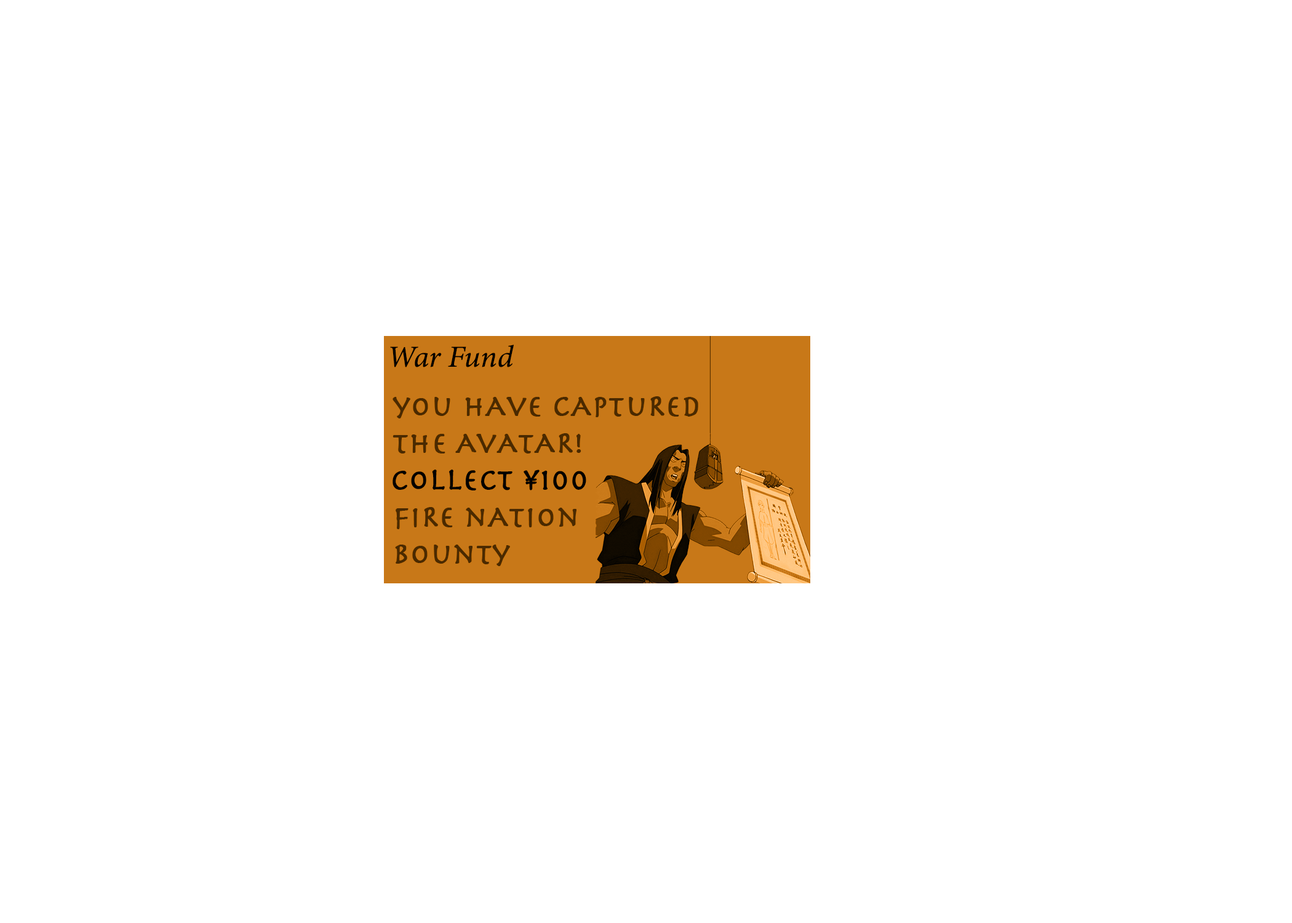
<style>
.page{position:relative;width:1292px;height:923px;background:#ffffff}
.page>*{position:absolute;margin:0}
.t1{font:30.8px "MinionConceptItalic-MediumItalic";color:#000000;font-weight:bold}
.t2{font:30.8px "Herculanum";color:#4d310e;font-weight:bold}
.t3{font:30.8px "Herculanum";color:#000000;font-weight:bold}
</style>
<div class="page">
<p class="t1" style="left:390px;top:345px;width:124px;height:22px">War Fund</p>
<p class="t2" style="left:393px;top:396px;width:305px;height:170px">you hAve cAptuRed<br>the AvAtAR!<br><br>fiRe nAtion<br>bounty</p>
<p class="t3" style="left:393px;top:469px;width:193px;height:21px"><span class="t2"> <br></span>collect ¥100</p>
</div>
